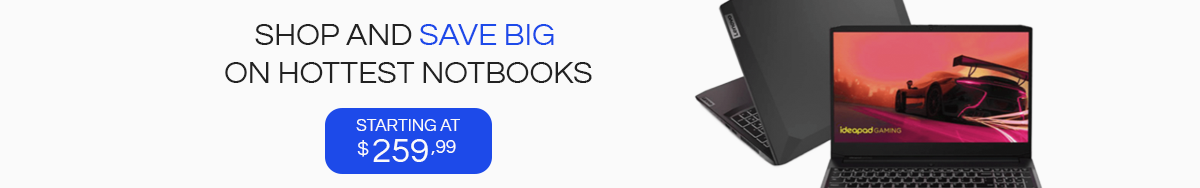
<style>
.page{position:relative;width:1200px;height:188px;background:#fafafa}
.page>*{position:absolute;margin:0}
.t1{font:31.6px "Questrial-Regular";color:#222222}
.t2{font:31.6px "Questrial-Regular";color:#1d4ae9}
.t3{font:17.1px "Questrial-Regular";color:#fafafa}
.t4{font:18.8px "Questrial-Regular";color:#fafafa}
.t5{font:34.7px "Questrial-Regular";color:#fafafa}
</style>
<div class="page">
<p class="t1" style="left:225px;top:24px;width:367px;height:59px;text-align:center">SHOP AND <span class="t2">SAVE BIG</span> <br>ON HOTTEST NOTBOOKS</p>
<p class="t3" style="left:356px;top:119px;width:104px;height:12px">STARTING AT</p>
<p class="t4" style="left:357px;top:140px;width:12px;height:17px">$</p>
<p class="t5" style="left:373px;top:139px;width:55px;height:23px">259</p>
<p class="t4" style="left:431px;top:140px;width:25px;height:15px">,99</p>
</div>
